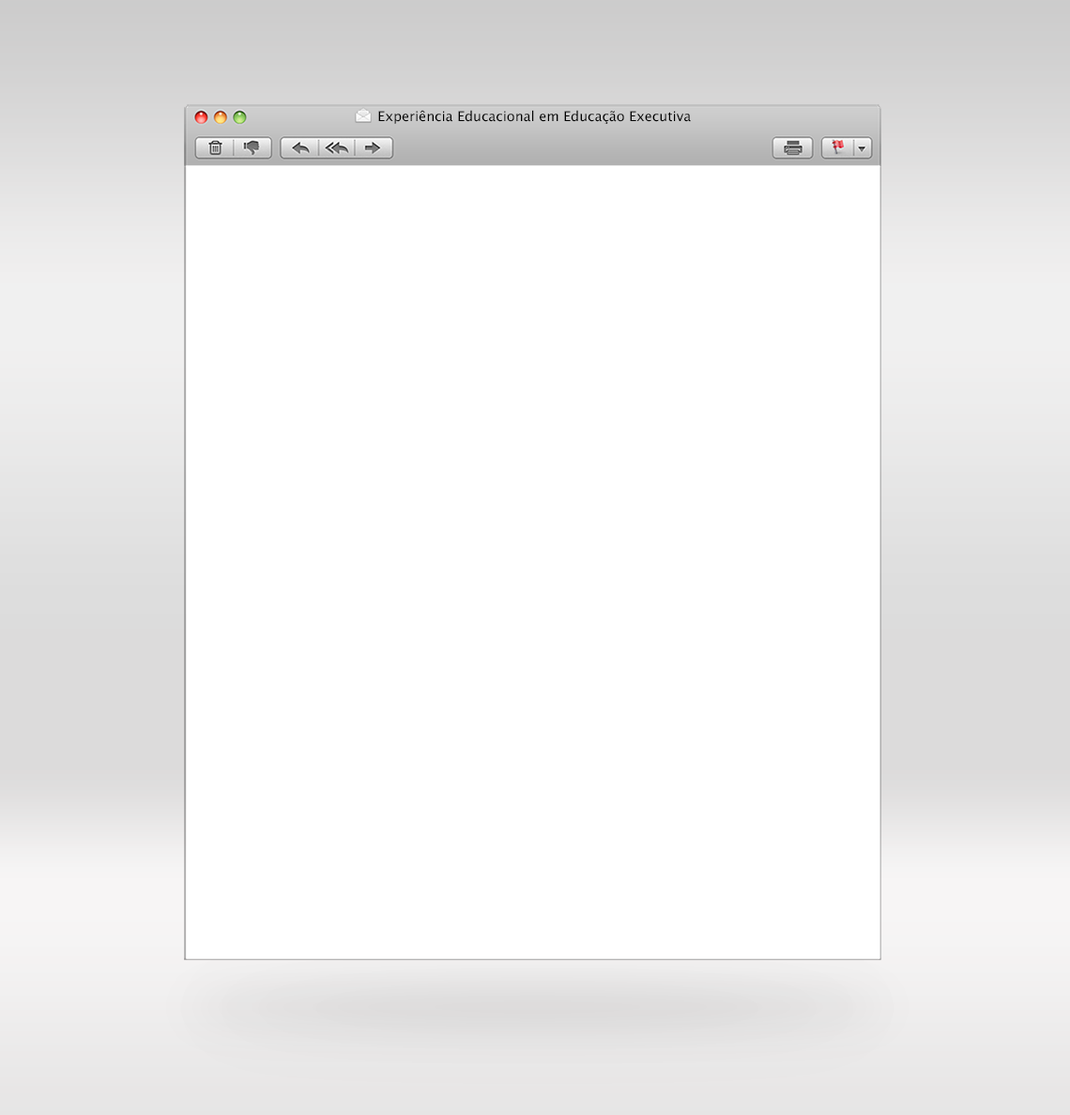
<style>
.page{position:relative;width:1070px;height:1115px;background:#ffffff}
.page>*{position:absolute;margin:0}
.t1{font:13.5px "LucidaGrande";color:#000000}
</style>
<div class="page">
<p class="t1" style="left:378px;top:110px;width:313px;height:14px">Experiência Educacional em Educação Executiva</p>
</div>
